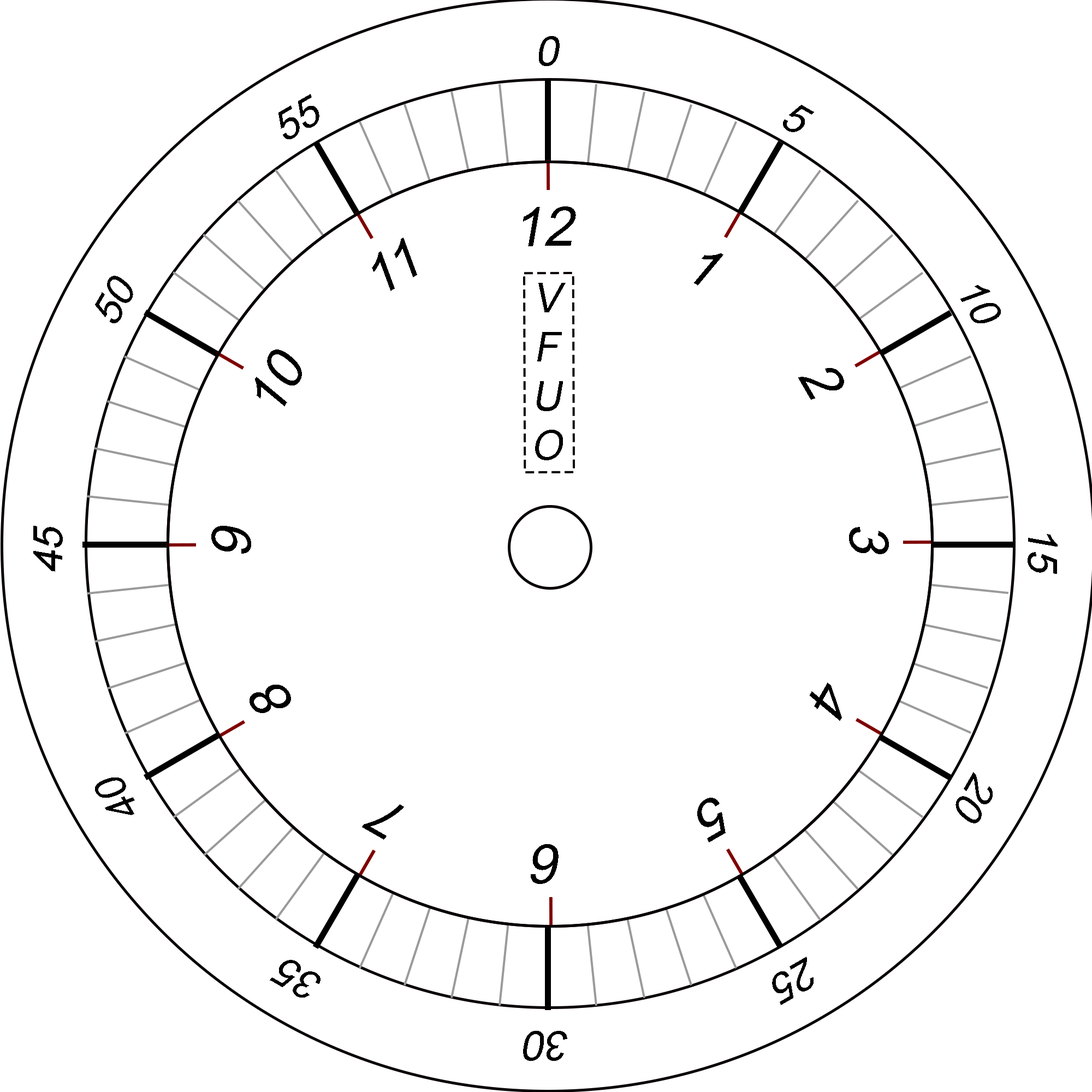
<style>
.page{position:relative;width:1092px;height:1092px;background:#ffffff}
.page>*{position:absolute;margin:0}
.t1{font:40.9px "ArialMT";color:#000000;font-style:italic}
.t2{font:54.6px "ArialMT";color:#000000;font-style:italic}
</style>
<div class="page">
<p class="t1" style="left:539px;top:36px;width:21px;height:30px">0</p>
<p class="t1" style="left:278px;top:94px;width:41px;height:45px;rotate:-30deg">55</p>
<p class="t1" style="left:783px;top:105px;width:31px;height:27px;rotate:30deg">5</p>
<p class="t2" style="left:523px;top:206px;width:53px;height:40px">12</p>
<p class="t2" style="left:372px;top:238px;width:45px;height:53px;rotate:-30deg">11</p>
<p class="t2" style="left:694px;top:253px;width:29px;height:33px;rotate:30deg">1</p>
<p class="t1" style="left:95px;top:276px;width:38px;height:47px;rotate:-60deg">50</p>
<p class="t1" style="left:535px;top:283px;width:31px;height:177px;text-align:center">V<br>F<br>U<br>O</p>
<p class="t1" style="left:960px;top:285px;width:41px;height:38px;rotate:60deg">10</p>
<p class="t2" style="left:255px;top:349px;width:47px;height:57px;rotate:-60deg">10</p>
<p class="t2" style="left:798px;top:368px;width:46px;height:32px;rotate:60deg">2</p>
<p class="t1" style="left:33px;top:526px;width:30px;height:46px;rotate:-90deg">45</p>
<p class="t2" style="left:211px;top:526px;width:40px;height:28px;rotate:-90deg">9</p>
<p class="t2" style="left:849px;top:527px;width:40px;height:27px;rotate:90deg">3</p>
<p class="t1" style="left:1028px;top:534px;width:30px;height:40px;rotate:90deg">15</p>
<p class="t2" style="left:250px;top:685px;width:41px;height:28px;rotate:-120deg">8</p>
<p class="t2" style="left:810px;top:682px;width:32px;height:39px;rotate:120deg">4</p>
<p class="t1" style="left:955px;top:772px;width:38px;height:51px;rotate:120deg">20</p>
<p class="t1" style="left:95px;top:777px;width:40px;height:38px;rotate:-120deg">40</p>
<p class="t2" style="left:697px;top:798px;width:29px;height:44px;rotate:150deg">5</p>
<p class="t2" style="left:362px;top:804px;width:42px;height:36px;rotate:-150deg">7</p>
<p class="t2" style="left:531px;top:844px;width:28px;height:40px;rotate:180deg">6</p>
<p class="t1" style="left:270px;top:960px;width:50px;height:38px;rotate:-150deg">35</p>
<p class="t1" style="left:772px;top:957px;width:42px;height:48px;rotate:150deg">25</p>
<p class="t1" style="left:523px;top:1031px;width:44px;height:30px;rotate:180deg">30</p>
</div>
